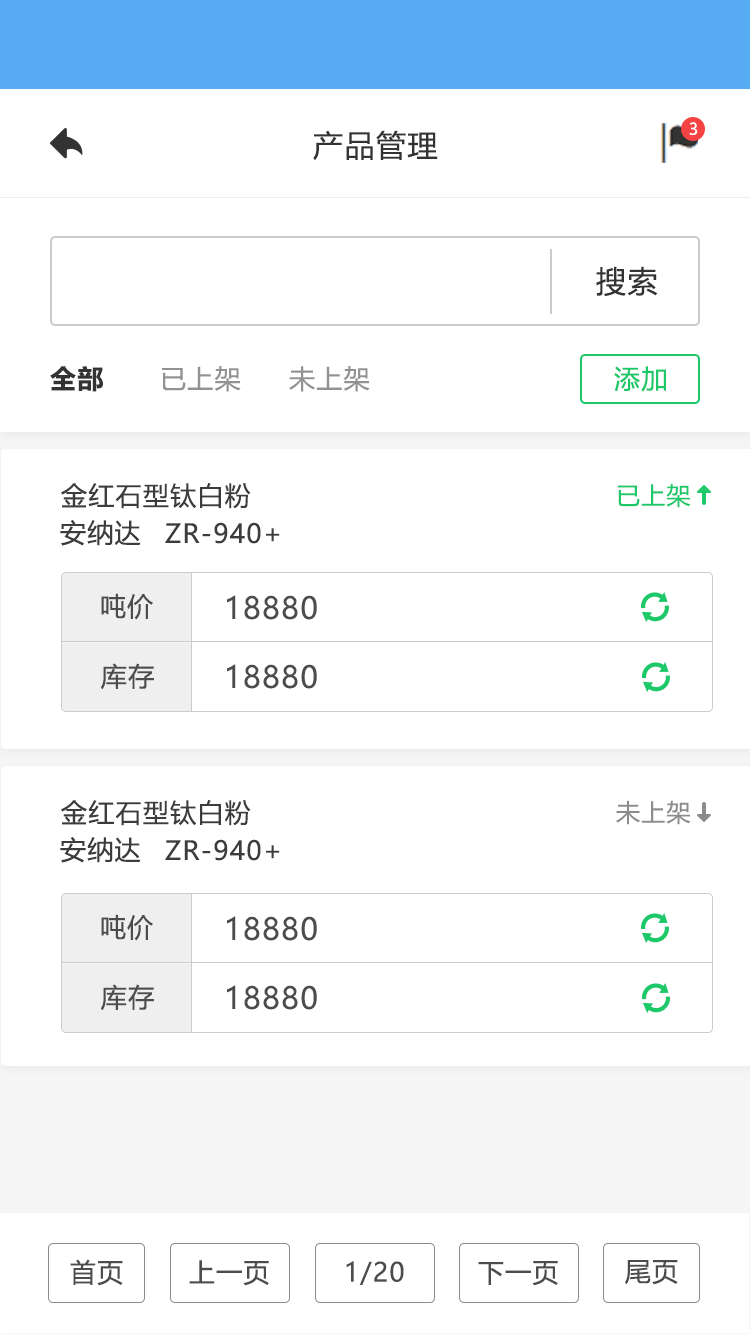
<style>
.page{position:relative;width:750px;height:1334px;background:#ffffff}
.page>*{position:absolute;margin:0}
.t1{font:16px "MicrosoftYaHeiUI";color:#ffffff}
.t2{font:30px "MicrosoftYaHeiUI";letter-spacing:0.05em;color:#333333}
.t3{font:26px "MicrosoftYaHeiUI-Bold";letter-spacing:0.05em;color:#333333}
.t4{font:26px "MicrosoftYaHeiUI";letter-spacing:0.05em;color:#929292}
.t5{font:26px "MicrosoftYaHeiUI";letter-spacing:0.05em;color:#1dc869}
.t6{font:26px "MicrosoftYaHeiUI";letter-spacing:0.05em;color:#3c3c3c}
.t7{font:24px "MicrosoftYaHeiUI";letter-spacing:0.05em;color:#1dc869}
.t8{font:26px "MicrosoftYaHeiUI";letter-spacing:0.05em;color:#4c4c4c}
.t9{font:30px "MicrosoftYaHeiUI";letter-spacing:0.05em;color:#4c4c4c}
.t10{font:24px "MicrosoftYaHeiUI";letter-spacing:0.05em;color:#8c8c8c}
</style>
<div class="page">
<p class="t1" style="left:689px;top:122px;width:9px;height:13px">3</p>
<p class="t2" style="left:313px;top:130px;width:125px;height:30px">产品管理</p>
<p class="t2" style="left:596px;top:266px;width:62px;height:30px">搜索</p>
<p class="t3" style="left:50px;top:366px;width:53px;height:26px">全部</p>
<p class="t4" style="left:162px;top:366px;width:79px;height:26px">已上架</p>
<p class="t4" style="left:289px;top:366px;width:81px;height:26px">未上架</p>
<p class="t5" style="left:614px;top:366px;width:52px;height:26px">添加</p>
<p class="t6" style="left:61px;top:483px;width:190px;height:26px">金红石型钛白粉</p>
<p class="t7" style="left:617px;top:483px;width:74px;height:25px">已上架</p>
<p class="t6" style="left:60px;top:520px;width:81px;height:26px">安纳达</p>
<p class="t6" style="left:165px;top:522px;width:115px;height:22px">ZR-940+</p>
<p class="t8" style="left:101px;top:593px;width:52px;height:27px">吨价</p>
<p class="t9" style="left:227px;top:595px;width:90px;height:25px">18880</p>
<p class="t8" style="left:100px;top:663px;width:54px;height:27px">库存</p>
<p class="t9" style="left:227px;top:664px;width:90px;height:25px">18880</p>
<p class="t6" style="left:61px;top:800px;width:190px;height:26px">金红石型钛白粉</p>
<p class="t10" style="left:616px;top:800px;width:75px;height:25px">未上架</p>
<p class="t6" style="left:60px;top:837px;width:81px;height:26px">安纳达</p>
<p class="t6" style="left:165px;top:839px;width:115px;height:22px">ZR-940+</p>
<p class="t8" style="left:101px;top:914px;width:52px;height:27px">吨价</p>
<p class="t9" style="left:227px;top:916px;width:90px;height:25px">18880</p>
<p class="t8" style="left:100px;top:984px;width:54px;height:27px">库存</p>
<p class="t9" style="left:227px;top:985px;width:90px;height:25px">18880</p>
<p class="t8" style="left:70px;top:1259px;width:53px;height:27px">首页</p>
<p class="t8" style="left:189px;top:1260px;width:80px;height:26px">上一页</p>
<p class="t8" style="left:346px;top:1261px;width:58px;height:24px">1/20</p>
<p class="t8" style="left:478px;top:1261px;width:80px;height:25px">下一页</p>
<p class="t8" style="left:625px;top:1260px;width:53px;height:25px">尾页</p>
</div>
